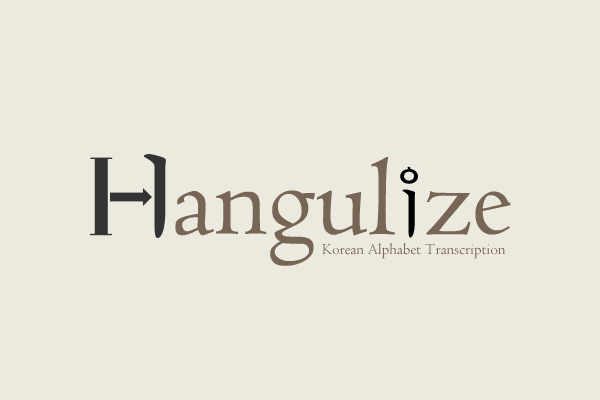
<style>
.page{position:relative;width:600px;height:400px;background:#eceade}
.page>*{position:absolute;margin:0}
.t1{font:114.3px "Centaur";color:#776655}
.t2{font:114.3px "Centaur";letter-spacing:-0.12em;color:#776655}
.t3{font:57.2px "H2mjrE";letter-spacing:-0.25em;color:#000000}
.t4{font:36.6px "H2mjrE";color:#000000}
.t5{font:16px "Centaur";color:#776655}
</style>
<div class="page">
<p class="t1" style="left:175px;top:157px;width:336px;height:109px">angu<span class="t2">l</span><span class="t3">ㅣ</span>ze</p>
<p class="t4" style="left:400px;top:166px;width:18px;height:18px">ㅇ</p>
<p class="t5" style="left:322px;top:243px;width:184px;height:16px">Korean Alphabet Transcription</p>
</div>
